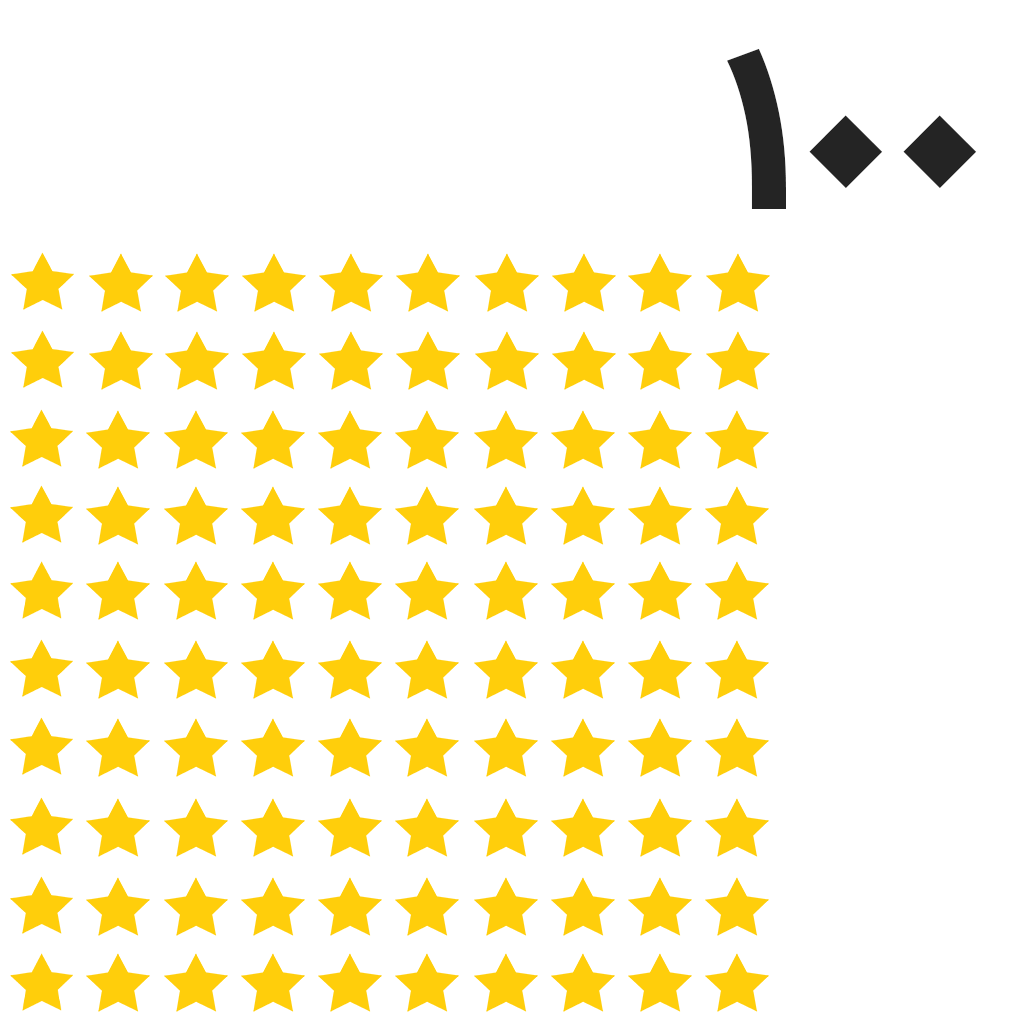
<style>
.page{position:relative;width:1024px;height:1024px;background:#ffffff}
.page>*{position:absolute;margin:0}
.t1{font:240px "Vazir-Black";color:#242424}
</style>
<div class="page">
<p class="t1" style="left:727px;top:48px;width:250px;height:161px">100</p>
</div>
